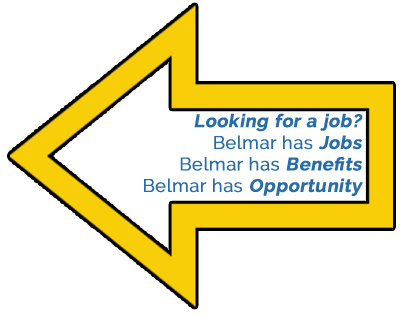
<style>
.page{position:relative;width:400px;height:315px;background:#ffffff}
.page>*{position:absolute;margin:0}
.t1{font:18px "Raleway-Bold";letter-spacing:0.025em;color:#276da9;font-weight:bold;font-style:italic}
.t2{font:18px "Raleway-Regular";letter-spacing:0.025em;color:#276da9;font-weight:bold}
</style>
<div class="page">
<p class="t1" style="left:144px;top:113px;width:219px;height:83px;text-align:right">Looking for a job?<br><span class="t2">Belmar has </span>Jobs<br><span class="t2">Belmar has </span>Benefits<br><span class="t2">Belmar has </span>Opportunity</p>
</div>
